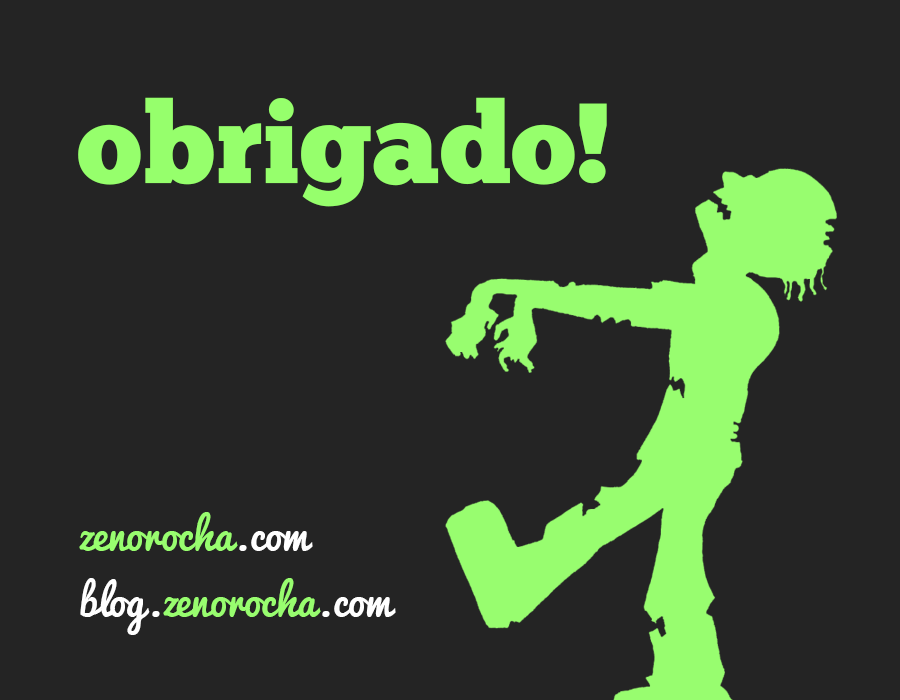
<style>
.page{position:relative;width:900px;height:700px;background:#242424}
.page>*{position:absolute;margin:0}
.t1{font:113.5px "ChunkFive-Roman";color:#96ff6c}
.t2{font:40.6px "Pacifico";color:#98fd6f}
.t3{font:40.6px "Pacifico";color:#ffffff}
</style>
<div class="page">
<p class="t1" style="left:78px;top:97px;width:529px;height:110px">obrigado!</p>
<p class="t2" style="left:79px;top:512px;width:234px;height:39px">zenorocha<span class="t3">.com</span></p>
<p class="t2" style="left:80px;top:578px;width:316px;height:57px"><span class="t3">blog.</span>zenorocha<span class="t3">.com</span></p>
</div>
